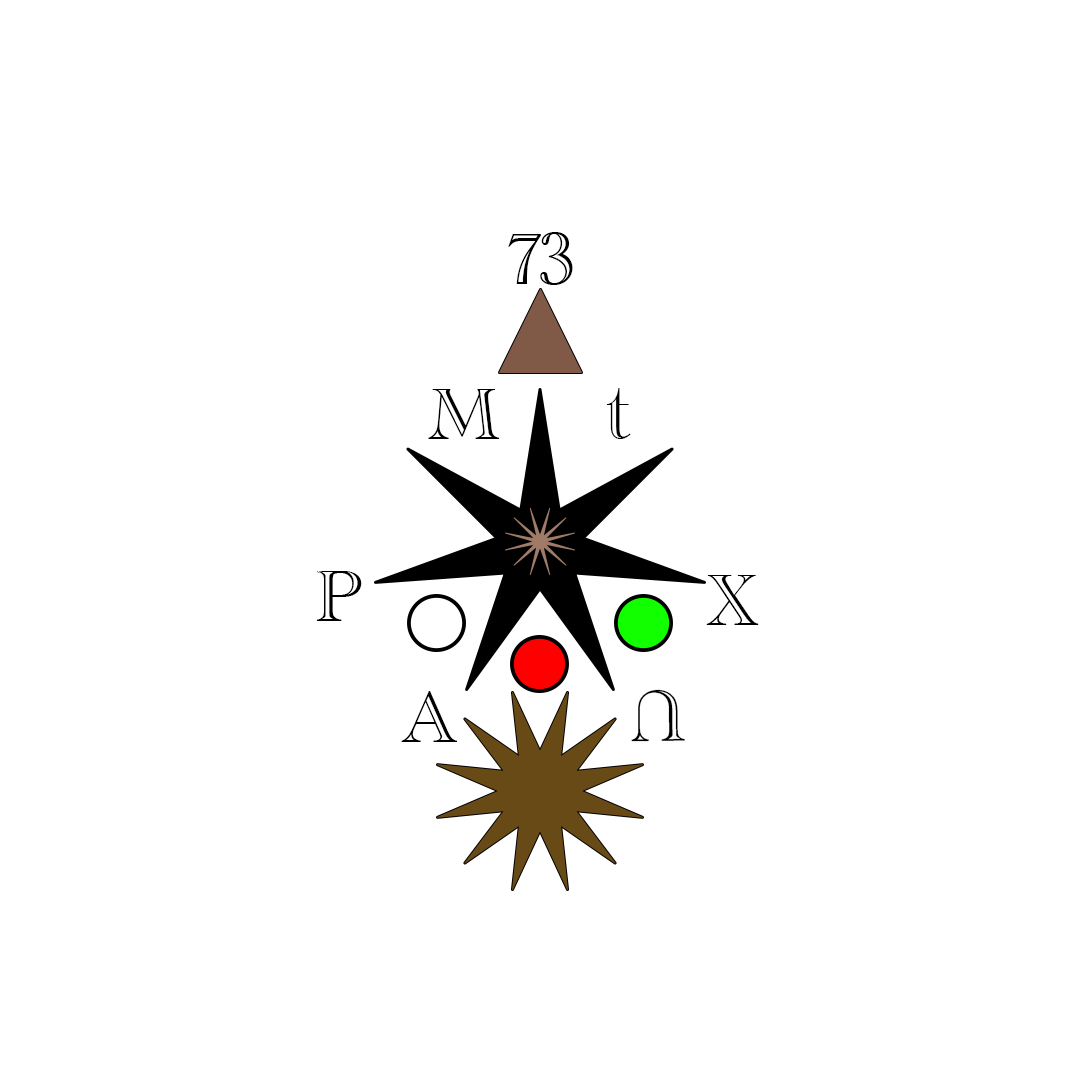
<style>
.page{position:relative;width:1080px;height:1080px;background:#ffffff}
.page>*{position:absolute;margin:0}
.t1{font:75px "AcademyEngravedLetPlain";color:#000000}
.t2{font:86.1px "AcademyEngravedLetPlain";color:#000000}
.t3{font:74.2px "AcademyEngravedLetPlain";color:#000000}
</style>
<div class="page">
<p class="t1" style="left:508px;top:232px;width:65px;height:53px">73</p>
<p class="t1" style="left:428px;top:389px;width:71px;height:50px">M</p>
<p class="t2" style="left:606px;top:388px;width:25px;height:51px">t</p>
<p class="t1" style="left:316px;top:571px;width:46px;height:50px">P</p>
<p class="t1" style="left:706px;top:575px;width:53px;height:50px">X</p>
<p class="t3" style="left:631px;top:689px;width:54px;height:53px;rotate:179deg">U</p>
<p class="t1" style="left:401px;top:691px;width:56px;height:51px">A</p>
</div>
